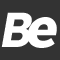
<style>
.page{position:relative;width:60px;height:60px;background:#333333}
.page>*{position:absolute;margin:0}
.t1{font:48px "WixMadeforText-ExtraBold";letter-spacing:-0.175em;color:#ffffff;font-style:italic}
.t2{font:57px "WixMadeforText-ExtraBold";letter-spacing:-0.175em;color:#ffffff;font-style:italic}
</style>
<div class="page">
<p class="t1" style="left:1px;top:12px;width:56px;height:36px">B<span class="t2">e</span></p>
</div>
